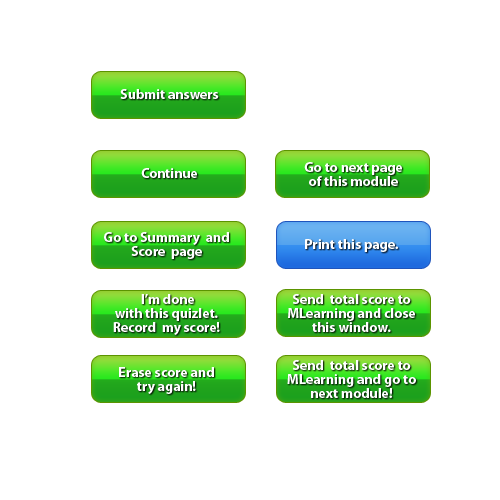
<style>
.page{position:relative;width:500px;height:500px;background:#ffffff}
.page>*{position:absolute;margin:0}
.t1{font:14px "MyriadPro-Bold";color:#ffffff}
.t2{font:14px/14px "MyriadPro-Bold";color:#ffffff}
</style>
<div class="page">
<p class="t1" style="left:120px;top:89px;width:99px;height:10px">Submit answers</p>
<p class="t1" style="left:141px;top:168px;width:56px;height:10px">Continue</p>
<p class="t2" style="left:304px;top:162px;width:98px;height:24px;text-align:center">Go to next page<br>of this module</p>
<p class="t2" style="left:104px;top:232px;width:125px;height:27px;text-align:center">Go to Summary  and Score  page</p>
<p class="t1" style="left:305px;top:239px;width:93px;height:13px">Print this page.</p>
<p class="t2" style="left:113px;top:294px;width:107px;height:41px;text-align:center">I’m done <br>with this quizlet.<br>Record  my score!</p>
<p class="t2" style="left:288px;top:294px;width:127px;height:38px;text-align:center">Send  total score to MLearning and close this window.</p>
<p class="t2" style="left:287px;top:360px;width:129px;height:38px;text-align:center">Send  total score to MLearning and go to next module!</p>
<p class="t2" style="left:119px;top:367px;width:95px;height:27px;text-align:center">Erase score and <br>try again!</p>
</div>
